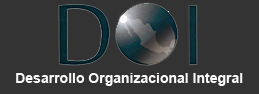
<style>
.page{position:relative;width:259px;height:94px;background:#333333}
.page>*{position:absolute;margin:0}
.t1{font:14px "Arial-BoldMT";color:#f9f9f9}
</style>
<div class="page">
<p class="t1" style="left:16px;top:73px;width:227px;height:13px">Desarrollo Organizacional Integral</p>
</div>
